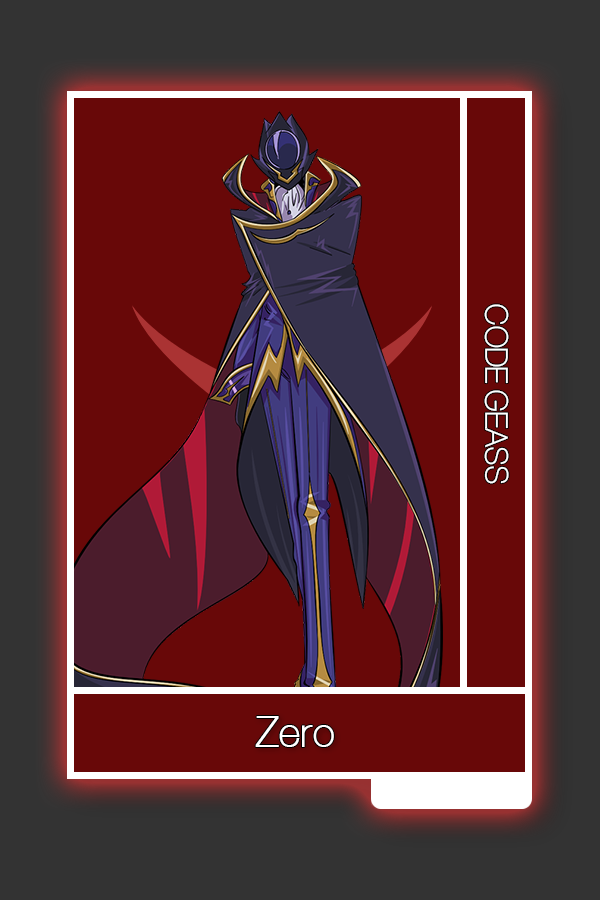
<style>
.page{position:relative;width:600px;height:900px;background:#680808}
.page>*{position:absolute;margin:0}
.t1{font:31.2px "Aliquam";color:#ffffff}
.t2{font:43.2px "Aliquam";color:#ffffff}
</style>
<div class="page">
<p class="t1" style="left:484px;top:304px;width:25px;height:180px;rotate:90deg">CODE GEASS</p>
<p class="t2" style="left:255px;top:716px;width:79px;height:31px">Zero</p>
</div>
